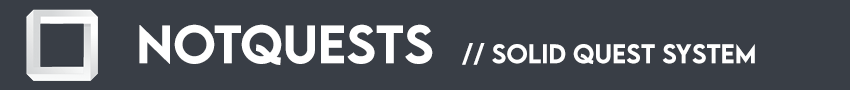
<style>
.page{position:relative;width:850px;height:90px;background:#393e46}
.page>*{position:absolute;margin:0}
.t1{font:24px "LEMONMILK-Medium";color:#ffffff}
.t2{font:48px "LEMONMILK-Medium";color:#ffffff}
</style>
<div class="page">
<p class="t1" style="left:139px;top:24px;width:616px;height:41px"><span class="t2">NotQuests  </span>// Solid Quest System</p>
</div>
